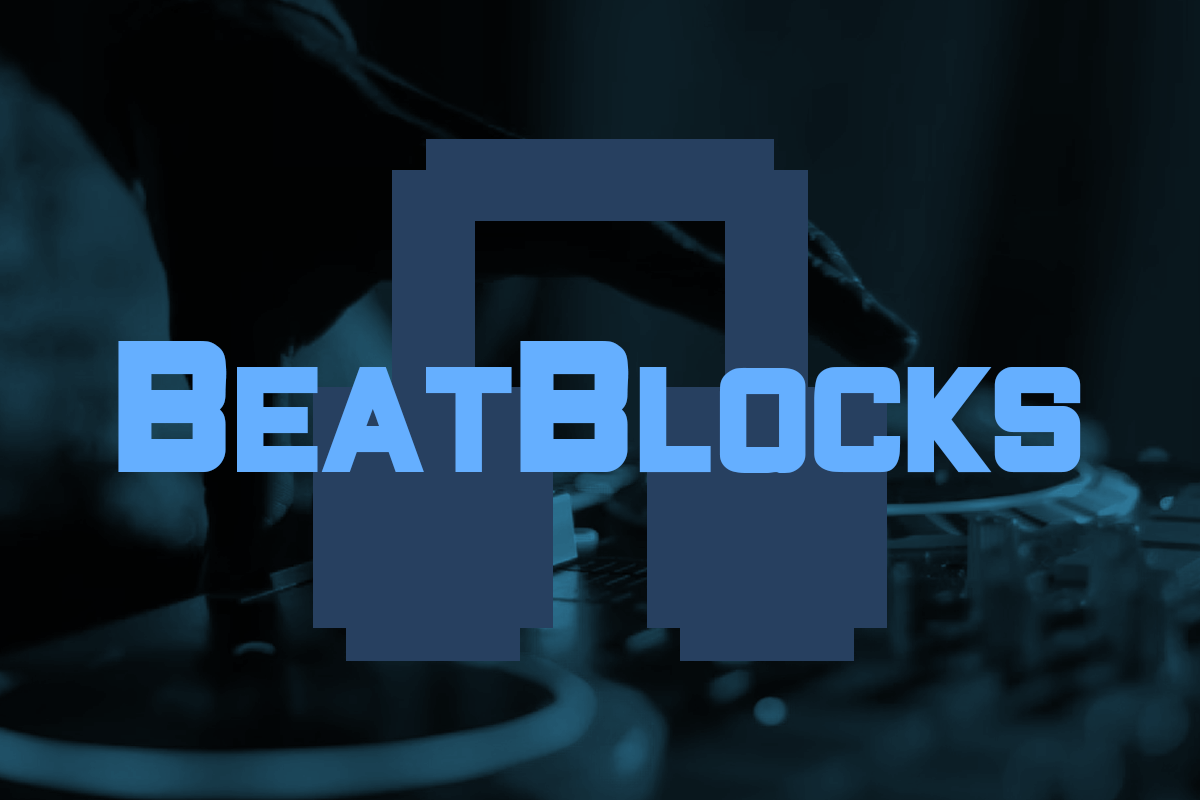
<style>
.page{position:relative;width:1200px;height:800px}
.page>*{position:absolute;margin:0}
.t1{font:150px "Closeness-Bold";color:#65afff}
.t2{font:187.5px "Closeness-Bold";color:#65afff}
</style>
<div class="page">
<p class="t1" style="left:118px;top:341px;width:963px;height:132px"><span class="t2">B</span>eat<span class="t2">B</span>locks</p>
</div>
